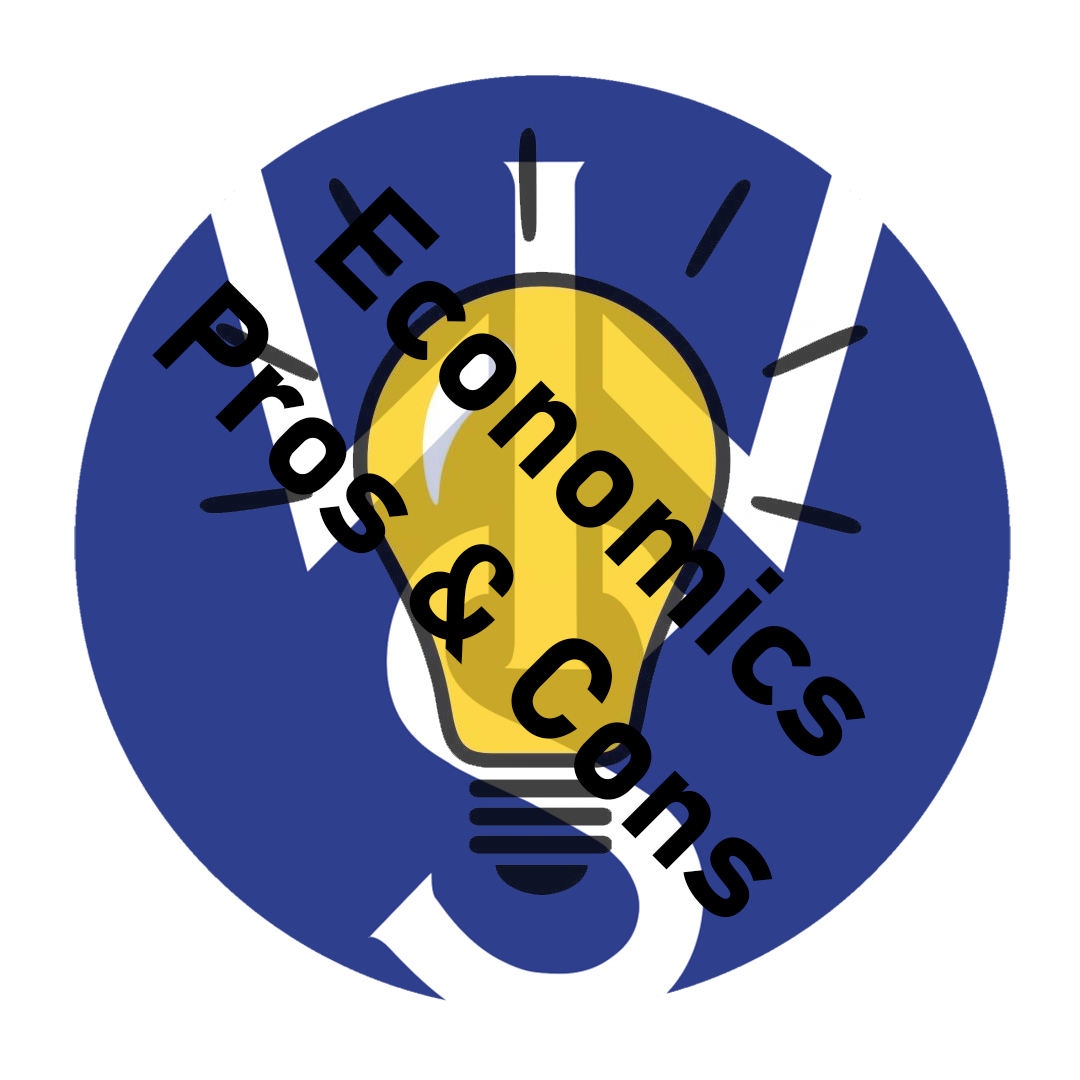
<style>
.page{position:relative;width:1080px;height:1080px;background:#ffffff}
.page>*{position:absolute;margin:0}
.t1{font:150px "Bahnschrift-Bold";color:#000000}
</style>
<div class="page">
<p class="t1" style="left:152px;top:186px;width:714px;height:732px;text-align:center;rotate:45deg">Economics<br>Pros &amp; Cons</p>
</div>
